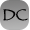
<style>
.page{position:relative;width:30px;height:30px}
.page>*{position:absolute;margin:0}
.t1{font:16px "Papyrus";color:#000000}
</style>
<div class="page">
<p class="t1" style="left:3px;top:9px;width:25px;height:12px">DC</p>
</div>
